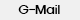
<style>
.page{position:relative;width:80px;height:20px;background:#f0f0f0}
.page>*{position:absolute;margin:0}
.t1{font:11.7px "ExpoM-HM";color:#000000}
</style>
<div class="page">
<p class="t1" style="left:18px;top:5px;width:42px;height:9px">G-Mail</p>
</div>
